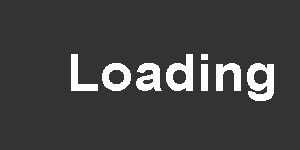
<style>
.page{position:relative;width:300px;height:150px;background:#333333}
.page>*{position:absolute;margin:0}
.t1{font:51.9px "Arial-BoldMT";color:#ffffff;scale:1.05 1}
</style>
<div class="page">
<p class="t1" style="left:71px;top:54px;width:203px;height:47px">Loading</p>
</div>
